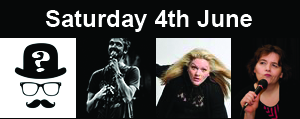
<style>
.page{position:relative;width:300px;height:119px;background:#060808}
.page>*{position:absolute;margin:0}
.t1{font:24px "Arial-BoldMT";color:#ffffff}
</style>
<div class="page">
<p class="t1" style="left:45px;top:10px;width:207px;height:22px">Saturday 4th June</p>
</div>
